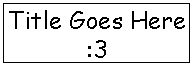
<style>
.page{position:relative;width:193px;height:66px;background:#ffffff}
.page>*{position:absolute;margin:0}
.t1{font:24px "ComicSansMS";color:#000000}
</style>
<div class="page">
<p class="t1" style="left:9px;top:10px;width:176px;height:48px;text-align:center">Title Goes Here<br>:3</p>
</div>
